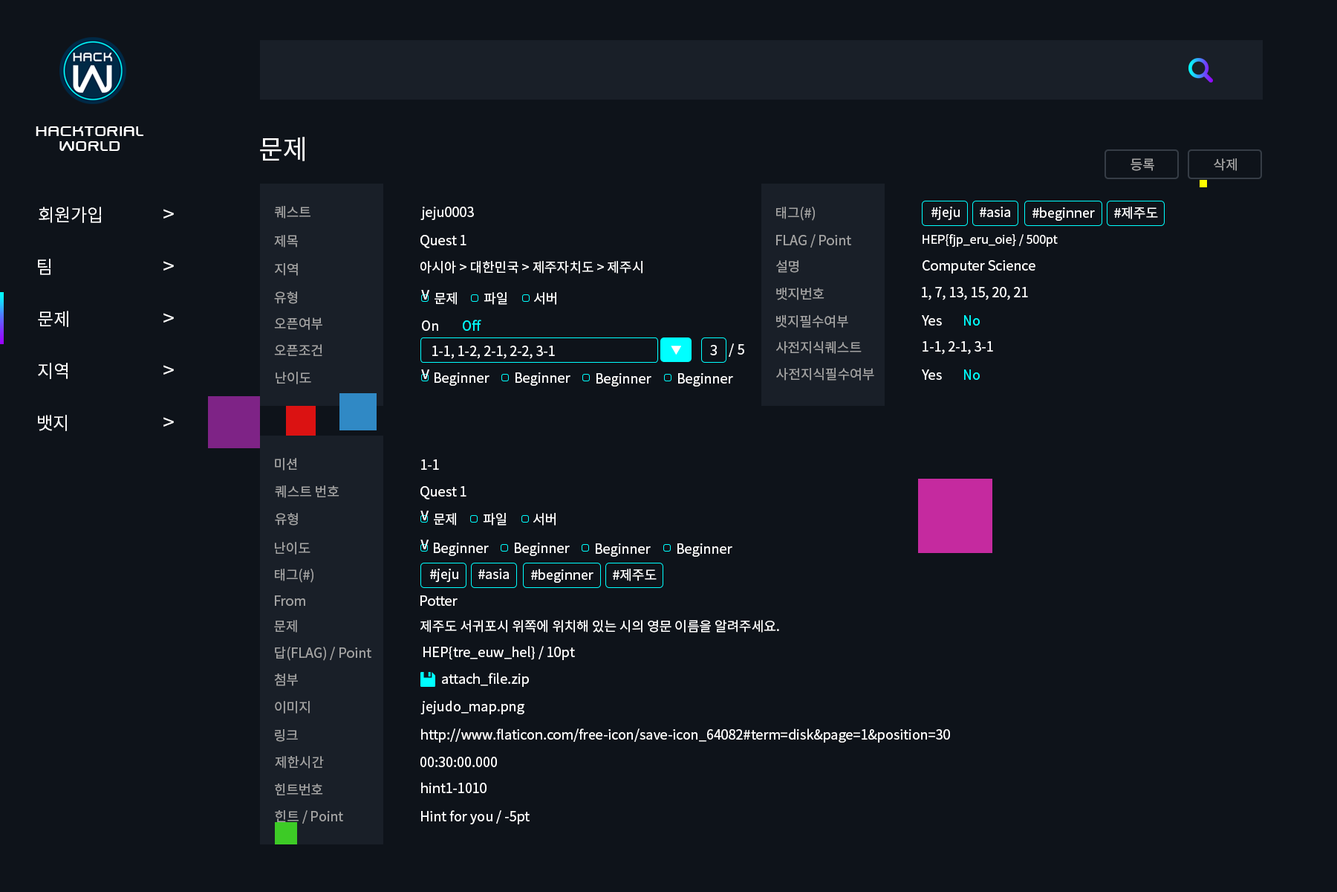
<style>
.page{position:relative;width:1337px;height:892px;background:#0e131a}
.page>*{position:absolute;margin:0}
.t1{font:17.8px/14.9px "SwiszRegular";color:#ffffff}
.t2{font:26.7px "NotoSansCJKkr-Regular";color:#ffffff}
.t3{font:13.4px "NotoSansCJKkr-Regular";color:#a6a6a6}
.t4{font:13.4px "NotoSansCJKkr-Regular";color:#a3a3a3}
.t5{font:17.8px "NotoSansCJKkr-Regular";color:#ffffff}
.t6{font:20.8px "NotoSansCJKkr-Regular";color:#ffffff}
.t7{font:13.4px "NotoSansCJKkr-Regular";color:#ffffff}
.t8{font:11.9px "NotoSansCJKkr-Regular";color:#ffffff}
.t9{font:13.4px "NotoSansCJKkr-Regular";color:#00ffff}
.t10{font:10.4px "NotoSansCJKkr-Regular";color:#ffffff}
</style>
<div class="page">
<p class="t1" style="left:36px;top:126px;width:107px;height:25px;text-align:center">hacktorial<br>world</p>
<p class="t2" style="left:260px;top:137px;width:45px;height:24px">문제</p>
<p class="t3" style="left:1131px;top:158px;width:24px;height:13px">등록</p>
<p class="t4" style="left:1214px;top:158px;width:23px;height:13px">삭제</p>
<p class="t5" style="left:39px;top:207px;width:62px;height:16px">회원가입</p>
<p class="t6" style="left:163px;top:209px;width:11px;height:9px">&gt;</p>
<p class="t4" style="left:275px;top:206px;width:36px;height:12px">퀘스트</p>
<p class="t7" style="left:421px;top:207px;width:53px;height:13px">jeju0003</p>
<p class="t4" style="left:776px;top:207px;width:39px;height:14px">태그(#)</p>
<p class="t7" style="left:932px;top:207px;width:28px;height:13px">#jeju</p>
<p class="t7" style="left:980px;top:207px;width:30px;height:10px">#asia</p>
<p class="t7" style="left:1033px;top:207px;width:62px;height:14px">#beginner</p>
<p class="t7" style="left:1115px;top:207px;width:43px;height:12px">#제주도</p>
<p class="t4" style="left:274px;top:235px;width:24px;height:12px">제목</p>
<p class="t7" style="left:421px;top:235px;width:46px;height:13px">Quest 1</p>
<p class="t4" style="left:776px;top:234px;width:75px;height:13px">FLAG / Point</p>
<p class="t8" style="left:923px;top:234px;width:135px;height:13px">HEP{fjp_eru_oie} / 500pt</p>
<p class="t5" style="left:38px;top:259px;width:13px;height:16px">팀</p>
<p class="t6" style="left:163px;top:261px;width:11px;height:9px">&gt;</p>
<p class="t4" style="left:275px;top:263px;width:23px;height:13px">지역</p>
<p class="t7" style="left:421px;top:261px;width:222px;height:12px">아시아 &gt; 대한민국 &gt; 제주자치도 &gt; 제주시</p>
<p class="t4" style="left:776px;top:260px;width:23px;height:13px">설명</p>
<p class="t7" style="left:923px;top:260px;width:113px;height:13px">Computer Science</p>
<p class="t4" style="left:274px;top:291px;width:23px;height:13px">유형</p>
<p class="t7" style="left:421px;top:290px;width:8px;height:9px">Ⅴ</p>
<p class="t7" style="left:435px;top:292px;width:22px;height:13px">문제</p>
<p class="t7" style="left:484px;top:292px;width:23px;height:13px">파일</p>
<p class="t7" style="left:534px;top:292px;width:23px;height:13px">서버</p>
<p class="t4" style="left:776px;top:287px;width:49px;height:13px">뱃지번호</p>
<p class="t7" style="left:922px;top:287px;width:106px;height:13px">1, 7, 13, 15, 20, 21</p>
<p class="t5" style="left:38px;top:311px;width:30px;height:16px">문제</p>
<p class="t6" style="left:163px;top:313px;width:11px;height:9px">&gt;</p>
<p class="t4" style="left:274px;top:317px;width:48px;height:13px">오픈여부</p>
<p class="t4" style="left:776px;top:314px;width:73px;height:14px">뱃지필수여부</p>
<p class="t7" style="left:922px;top:315px;width:20px;height:10px">Yes</p>
<p class="t9" style="left:964px;top:315px;width:16px;height:10px">No</p>
<p class="t7" style="left:422px;top:320px;width:16px;height:11px">On</p>
<p class="t9" style="left:463px;top:319px;width:18px;height:12px">Off</p>
<p class="t4" style="left:776px;top:341px;width:86px;height:13px">사전지식퀘스트</p>
<p class="t7" style="left:923px;top:341px;width:70px;height:13px">1-1, 2-1, 3-1</p>
<p class="t4" style="left:274px;top:344px;width:48px;height:12px">오픈조건</p>
<p class="t7" style="left:432px;top:345px;width:123px;height:14px">1-1, 1-2, 2-1, 2-2, 3-1</p>
<p class="t10" style="left:671px;top:345px;width:10px;height:9px">▼</p>
<p class="t7" style="left:710px;top:345px;width:7px;height:10px">3</p>
<p class="t7" style="left:729px;top:343px;width:15px;height:14px">/ 5</p>
<p class="t5" style="left:38px;top:363px;width:30px;height:16px">지역</p>
<p class="t6" style="left:163px;top:365px;width:11px;height:9px">&gt;</p>
<p class="t4" style="left:276px;top:372px;width:35px;height:12px">난이도</p>
<p class="t7" style="left:421px;top:369px;width:8px;height:10px">Ⅴ</p>
<p class="t7" style="left:435px;top:372px;width:55px;height:14px">Beginner</p>
<p class="t7" style="left:516px;top:372px;width:55px;height:14px">Beginner</p>
<p class="t7" style="left:597px;top:373px;width:55px;height:13px">Beginner</p>
<p class="t7" style="left:678px;top:373px;width:55px;height:13px">Beginner</p>
<p class="t4" style="left:776px;top:367px;width:99px;height:13px">사전지식필수여부</p>
<p class="t7" style="left:922px;top:369px;width:20px;height:11px">Yes</p>
<p class="t9" style="left:964px;top:369px;width:16px;height:11px">No</p>
<p class="t5" style="left:38px;top:415px;width:29px;height:16px">뱃지</p>
<p class="t6" style="left:163px;top:417px;width:11px;height:9px">&gt;</p>
<p class="t4" style="left:275px;top:458px;width:22px;height:12px">미션</p>
<p class="t7" style="left:421px;top:459px;width:18px;height:11px">1-1</p>
<p class="t4" style="left:275px;top:485px;width:65px;height:13px">퀘스트 번호</p>
<p class="t7" style="left:421px;top:486px;width:46px;height:13px">Quest 1</p>
<p class="t4" style="left:275px;top:513px;width:23px;height:12px">유형</p>
<p class="t7" style="left:421px;top:510px;width:8px;height:10px">Ⅴ</p>
<p class="t7" style="left:434px;top:513px;width:22px;height:12px">문제</p>
<p class="t7" style="left:483px;top:513px;width:24px;height:12px">파일</p>
<p class="t7" style="left:533px;top:513px;width:23px;height:12px">서버</p>
<p class="t4" style="left:275px;top:542px;width:36px;height:12px">난이도</p>
<p class="t7" style="left:421px;top:539px;width:8px;height:10px">Ⅴ</p>
<p class="t7" style="left:434px;top:542px;width:55px;height:14px">Beginner</p>
<p class="t7" style="left:515px;top:542px;width:55px;height:14px">Beginner</p>
<p class="t7" style="left:596px;top:543px;width:55px;height:14px">Beginner</p>
<p class="t7" style="left:678px;top:543px;width:55px;height:14px">Beginner</p>
<p class="t4" style="left:275px;top:568px;width:39px;height:15px">태그(#)</p>
<p class="t7" style="left:430px;top:568px;width:28px;height:14px">#jeju</p>
<p class="t7" style="left:478px;top:568px;width:31px;height:11px">#asia</p>
<p class="t7" style="left:531px;top:568px;width:63px;height:15px">#beginner</p>
<p class="t7" style="left:613px;top:568px;width:44px;height:13px">#제주도</p>
<p class="t4" style="left:275px;top:595px;width:30px;height:11px">From</p>
<p class="t7" style="left:421px;top:595px;width:37px;height:11px">Potter</p>
<p class="t4" style="left:274px;top:620px;width:23px;height:12px">문제</p>
<p class="t7" style="left:421px;top:620px;width:358px;height:12px">제주도 서귀포시 위쪽에 위치해 있는 시의 영문 이름을 알려주세요.</p>
<p class="t4" style="left:275px;top:646px;width:97px;height:15px">답(FLAG) / Point</p>
<p class="t7" style="left:424px;top:646px;width:151px;height:14px">HEP{tre_euw_hel} / 10pt</p>
<p class="t4" style="left:274px;top:673px;width:24px;height:13px">첨부</p>
<p class="t7" style="left:442px;top:672px;width:87px;height:15px">attach_file.zip</p>
<p class="t4" style="left:275px;top:701px;width:35px;height:12px">이미지</p>
<p class="t7" style="left:421px;top:700px;width:104px;height:14px">jejudo_map.png</p>
<p class="t4" style="left:275px;top:729px;width:23px;height:13px">링크</p>
<p class="t7" style="left:421px;top:728px;width:529px;height:14px">http://www.flaticon.com/free-icon/save-icon_64082#term=disk&amp;page=1&amp;position=30</p>
<p class="t4" style="left:275px;top:756px;width:49px;height:12px">제한시간</p>
<p class="t7" style="left:421px;top:756px;width:76px;height:11px">00:30:00.000</p>
<p class="t4" style="left:275px;top:783px;width:48px;height:12px">힌트번호</p>
<p class="t7" style="left:421px;top:782px;width:66px;height:11px">hint1-1010</p>
<p class="t4" style="left:275px;top:810px;width:68px;height:13px">힌트 / Point</p>
<p class="t7" style="left:421px;top:810px;width:109px;height:14px">Hint for you / -5pt</p>
</div>
